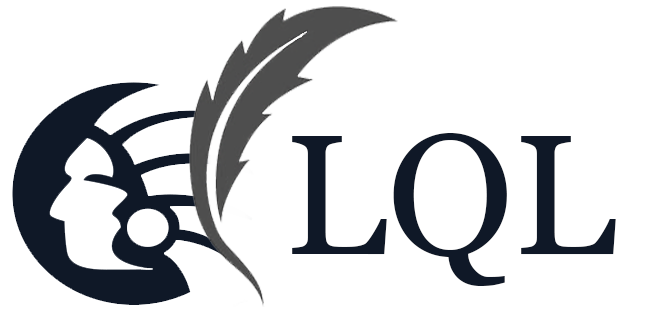
<style>
.page{position:relative;width:656px;height:320px;background:#ffffff}
.page>*{position:absolute;margin:0}
.t1{font:170px "Georgia";color:#0f1827}
</style>
<div class="page">
<p class="t1" style="left:292px;top:133px;width:324px;height:153px">LQL</p>
</div>
